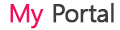
<style>
.page{position:relative;width:120px;height:30px;background:#ffffff}
.page>*{position:absolute;margin:0}
.t1{font:25px "MalgunGothicRegular";letter-spacing:-0.04em;color:#3e3e3e;font-weight:bold}
.t2{font:25px "MalgunGothicRegular";letter-spacing:-0.04em;color:#f11065;font-weight:bold}
</style>
<div class="page">
<p class="t1" style="left:10px;top:3px;width:104px;height:26px"><span class="t2">My </span>Portal</p>
</div>
